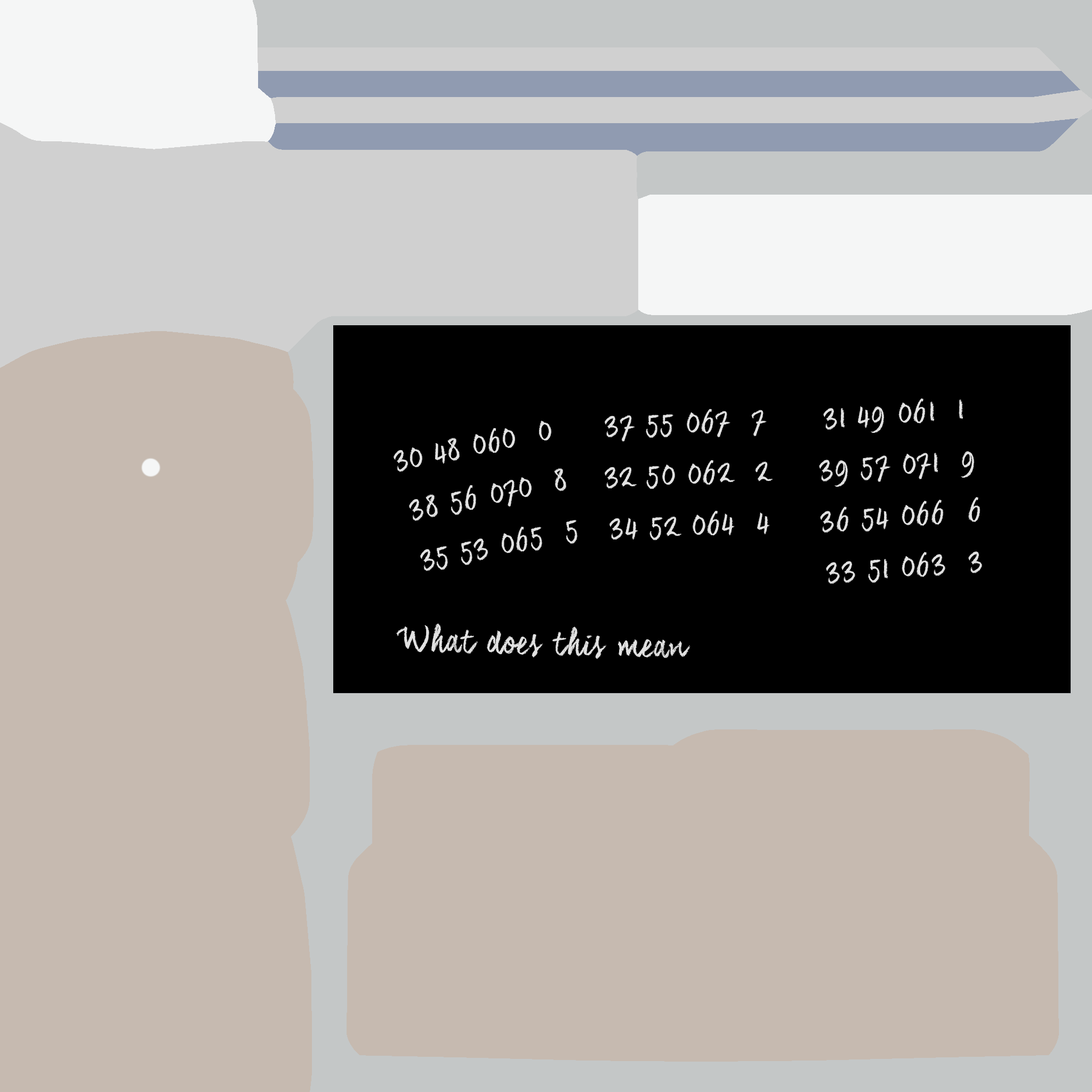
<style>
.page{position:relative;width:1092px;height:1092px;background:#c6bab0}
.page>*{position:absolute;margin:0}
.t1{font:29.3px/25.6px "CoalhandLukeTRIAL";color:#e2e2e2}
.t2{font:32px "CoalhandLukeTRIAL";color:#e2e2e2}
</style>
<div class="page">
<p class="t1" style="left:819px;top:398px;width:163px;height:186px;text-align:center;rotate:-4deg">31 49 061  1<br><br>39 57 071  9<br><br>36 54 066  6<br><br>33 51 063  3</p>
<p class="t1" style="left:605px;top:409px;width:168px;height:131px;text-align:center;rotate:-2deg">37 55 067  7<br><br>32 50 062  2<br><br>34 52 064  4</p>
<p class="t1" style="left:393px;top:421px;width:184px;height:150px;text-align:center;rotate:-12deg">30 48 060  0<br><br> 38 56 070  8<br><br>  35 53 065  5</p>
<p class="t2" style="left:396px;top:623px;width:294px;height:36px;rotate:1deg">What does this mean</p>
</div>
